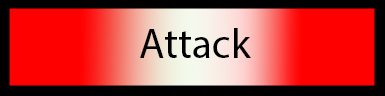
<style>
.page{position:relative;width:385px;height:96px;background:#ff0000}
.page>*{position:absolute;margin:0}
.t1{font:41.7px "MyriadPro-Regular";color:#000000}
</style>
<div class="page">
<p class="t1" style="left:140px;top:28px;width:111px;height:30px">Attack</p>
</div>
